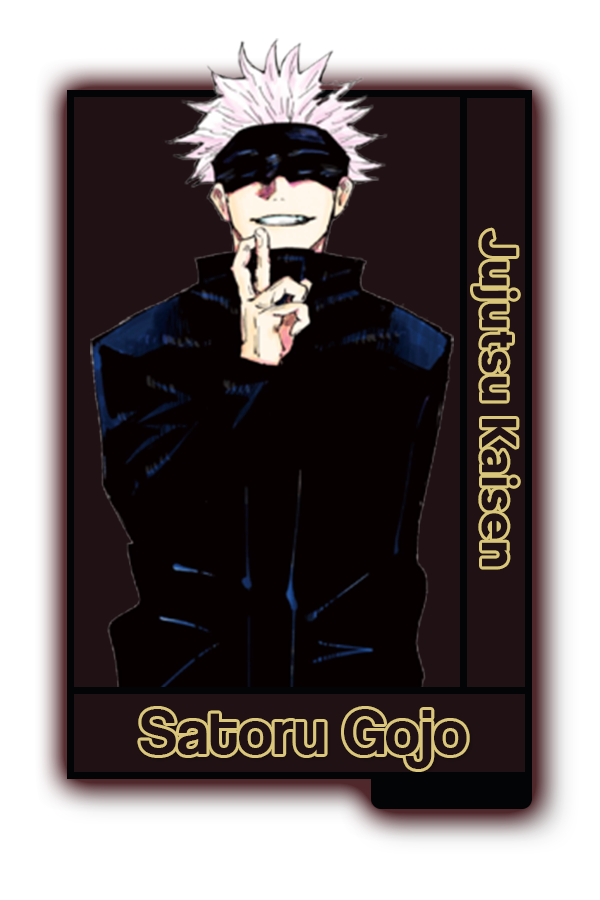
<style>
.page{position:relative;width:600px;height:900px;background:#1f1114}
.page>*{position:absolute;margin:0}
.t1{font:48.8px "MADETOMMY-Bold";color:#1e1214}
.t2{font:65.2px "CoolveticaRg-Regular";color:#1e1214}
</style>
<div class="page">
<p class="t1" style="left:473px;top:230px;width:45px;height:337px;rotate:90deg">Jujutsu Kaisen</p>
<p class="t2" style="left:140px;top:709px;width:327px;height:60px">Satoru Gojo</p>
</div>
